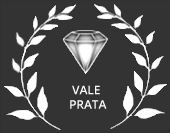
<style>
.page{position:relative;width:170px;height:133px;background:#333333}
.page>*{position:absolute;margin:0}
.t1{font:12px/14.4px "OpenSans-Semibold";letter-spacing:-0.005em;color:#ffffff}
</style>
<div class="page">
<p class="t1" style="left:70px;top:85px;width:37px;height:24px;text-align:center">VALE <br>PRATA</p>
</div>
